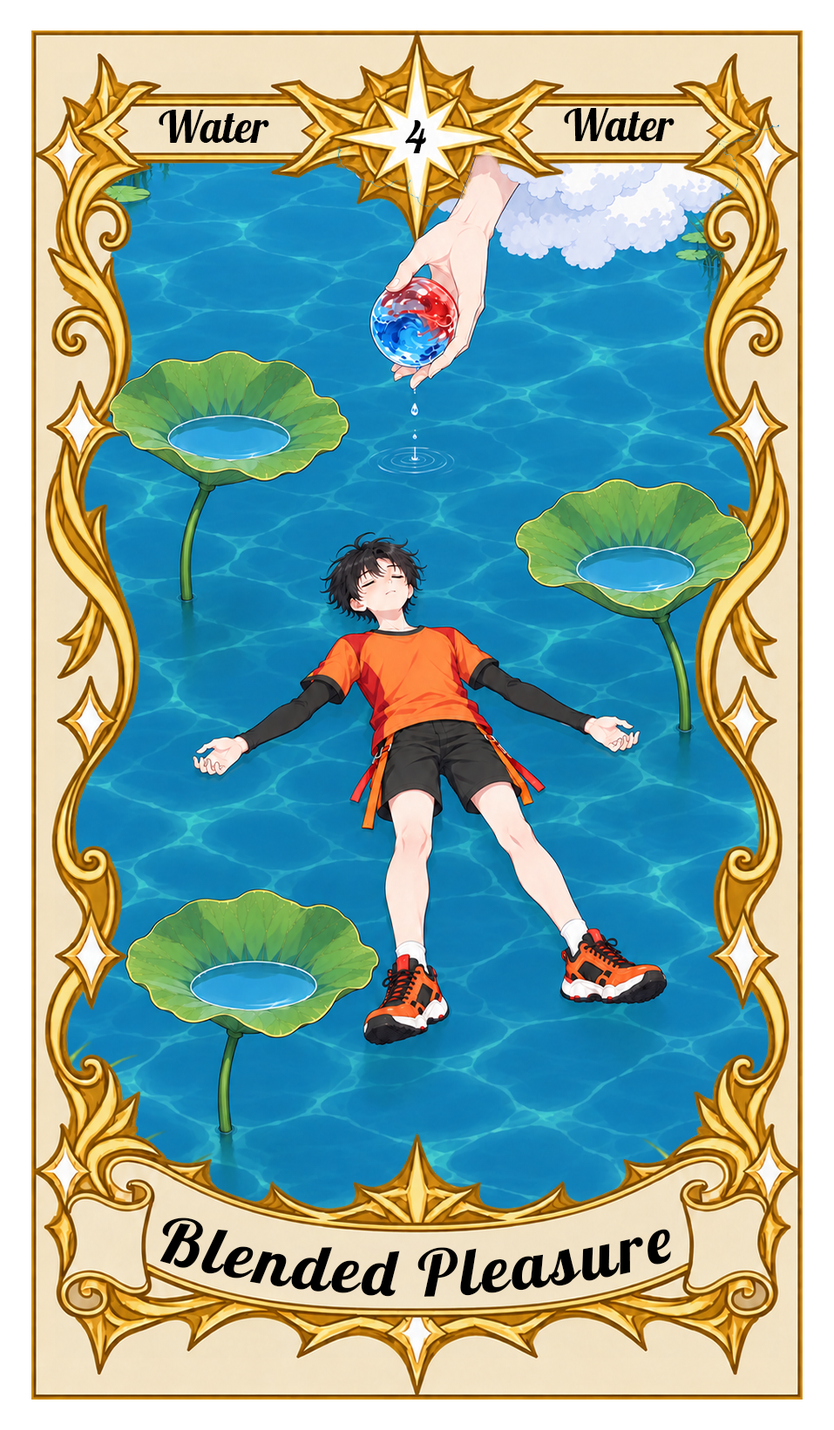
<style>
.page{position:relative;width:834px;height:1430px}
.page>*{position:absolute;margin:0}
.t1{font:43.6px "Lobster-Regular";color:#000000}
.t2{font:65.3px "Lobster-Regular";letter-spacing:0.05em;color:#000000}
</style>
<div class="page">
<p class="t1" style="left:159px;top:110px;width:110px;height:33px">Water</p>
<p class="t1" style="left:564px;top:108px;width:110px;height:33px">Water</p>
<p class="t1" style="left:404px;top:120px;width:22px;height:33px">4</p>
<p class="t2" style="left:159px;top:1218px;width:512px;height:79px">Blended Pleasure</p>
</div>
